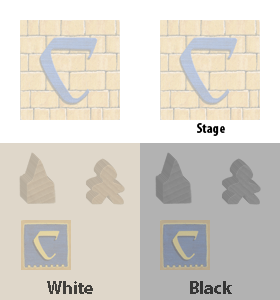
<style>
.page{position:relative;width:280px;height:300px;background:#ffffff}
.page>*{position:absolute;margin:0}
.t1{font:14px "MyriadPro-BoldCond";color:#000000}
.t2{font:18px "MyriadPro-Bold";color:#42403c}
.t3{font:18px "MyriadPro-Bold";color:#353535}
</style>
<div class="page">
<p class="t1" style="left:197px;top:123px;width:28px;height:13px">Stage</p>
<p class="t2" style="left:47px;top:281px;width:46px;height:13px">White</p>
<p class="t3" style="left:190px;top:281px;width:42px;height:13px">Black</p>
</div>
